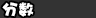
<style>
.page{position:relative;width:96px;height:18px;background:#333333}
.page>*{position:absolute;margin:0}
.t1{font:16px "DFPHaiBaoW12";color:#ffffff}
</style>
<div class="page">
<p class="t1" style="left:2px;top:2px;width:32px;height:15px">分数</p>
</div>
